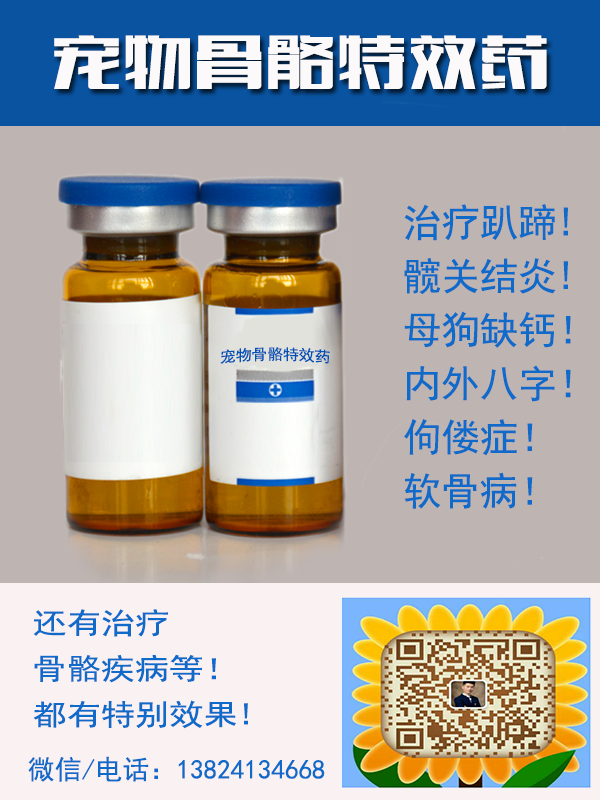
<style>
.page{position:relative;width:600px;height:800px;background:#beb4b2}
.page>*{position:absolute;margin:0}
.t1{font:71.8px "FZCTHJW--GB1-0";color:#fbf9f9}
.t2{font:38.4px/53.7px "SimHei";color:#0f6ac9}
.t3{font:15.4px "SimHei";color:#0152b6}
.t4{font:29.2px/45.8px "SimHei";color:#0f6ac9;scale:1.17 1}
.t5{font:20.8px/29.2px "SimHei";color:#0f6ac9;scale:1.17 1}
.t6{font:27.1px "SimHei";color:#0f6ac9}
</style>
<div class="page">
<p class="t1" style="left:54px;top:35px;width:493px;height:54px">宠物骨骼特效药</p>
<p class="t2" style="left:404px;top:204px;width:167px;height:305px">治疗趴蹄!<br>髋关结炎!<br>母狗缺钙！<br>内外八字！<br>佝偻症！  <br>软骨病！</p>
<p class="t3" style="left:220px;top:347px;width:110px;height:17px">宠物骨骼特效药</p>
<p class="t4" style="left:33px;top:609px;width:215px;height:120px"><span class="t5"><br></span>还有治疗<br>骨骼疾病等！<br>都有特别效果!</p>
<p class="t6" style="left:28px;top:756px;width:297px;height:26px">微信/电话：13824134668</p>
</div>
